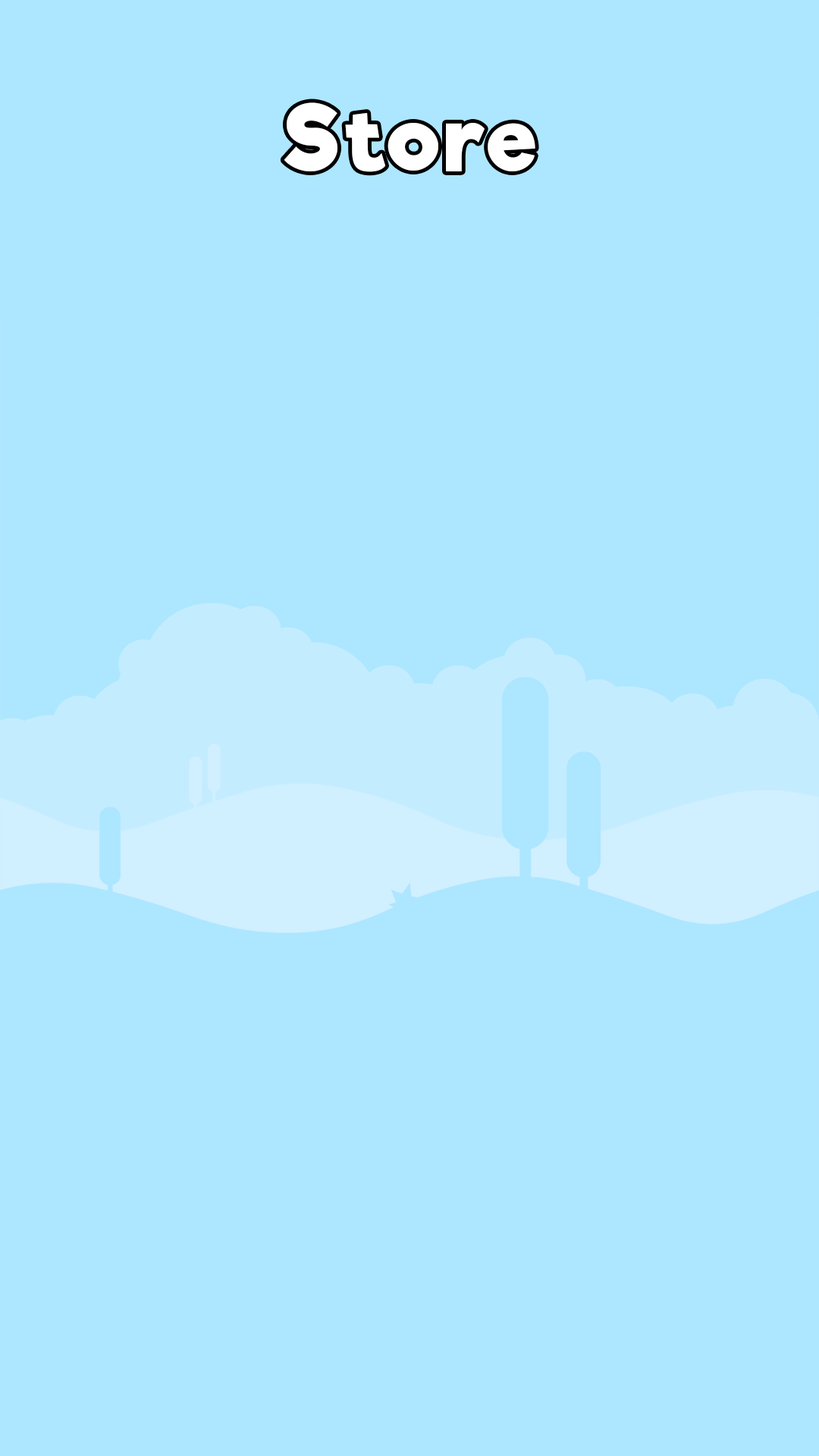
<style>
.page{position:relative;width:819px;height:1456px;background:#ade6ff}
.page>*{position:absolute;margin:0}
.t1{font:88.5px "Riffic-Bold";letter-spacing:0.05em;color:#ffffff}
</style>
<div class="page">
<p class="t1" style="left:284px;top:102px;width:251px;height:70px">Store</p>
</div>
